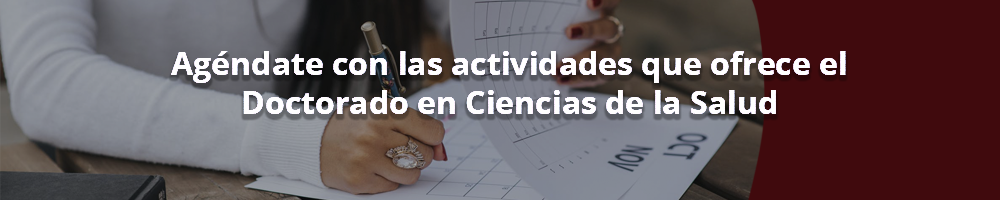
<style>
.page{position:relative;width:1000px;height:200px;background:#400a0d}
.page>*{position:absolute;margin:0}
.t1{font:32px "OpenSans-Bold";color:#ffffff}
</style>
<div class="page">
<p class="t1" style="left:171px;top:51px;width:675px;height:63px;text-align:center">Agéndate con las actividades que ofrece el  Doctorado en Ciencias de la Salud</p>
</div>
